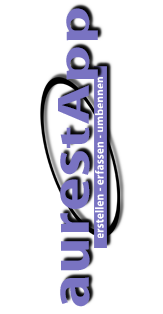
<style>
.page{position:relative;width:163px;height:314px;background:#ffffff}
.page>*{position:absolute;margin:0}
.t1{font:57px "Myriad-Bold";color:#7973c2;scale:1.14 1}
.t2{font:45.6px "Myriad-Bold";color:#7973c2;scale:1.42 1}
</style>
<div class="page">
<p class="t1" style="left:58px;top:8px;width:40px;height:299px;rotate:-90deg">aures<span class="t2">tApp</span></p>
</div>
